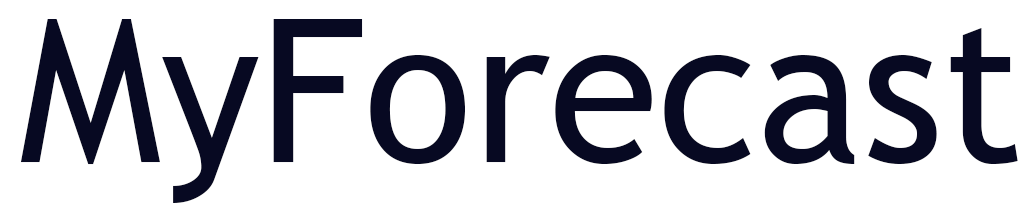
<style>
.page{position:relative;width:1031px;height:220px;background:#ffffff}
.page>*{position:absolute;margin:0}
.t1{font:200px "TrebuchetMS";color:#070922}
</style>
<div class="page">
<p class="t1" style="left:20px;top:19px;width:998px;height:184px">MyForecast</p>
</div>
